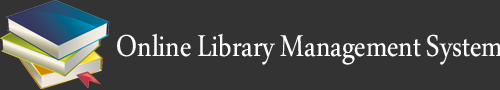
<style>
.page{position:relative;width:500px;height:90px;background:#333333}
.page>*{position:absolute;margin:0}
.t1{font:44.4px "MicrosoftUighur";color:#ffffff;scale:0.86 1}
</style>
<div class="page">
<p class="t1" style="left:117px;top:33px;width:383px;height:32px">Online Library Management System</p>
</div>
